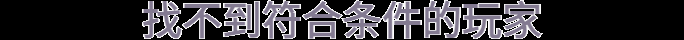
<style>
.page{position:relative;width:684px;height:40px;background:#000000}
.page>*{position:absolute;margin:0}
.t1{font:40px "WebPSD-18463539-0-Regular";color:#837a91;font-weight:bold}
</style>
<div class="page">
<p class="t1" style="left:0px;top:0px;width:684px;height:40px">找不到符合条件的玩家</p>
</div>
